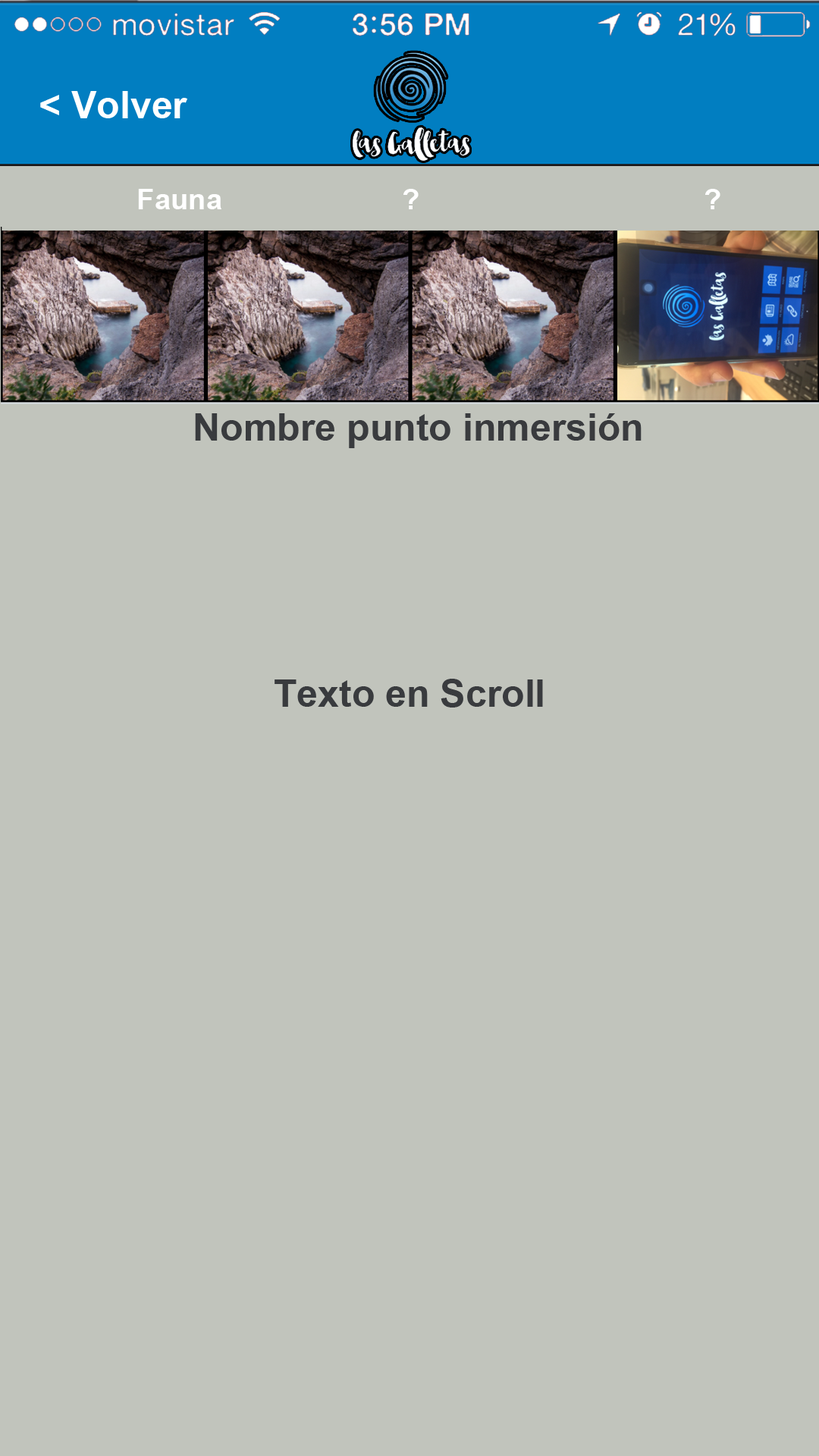
<style>
.page{position:relative;width:819px;height:1456px;background:#c1c4bc}
.page>*{position:absolute;margin:0}
.t1{font:37.9px "Arial-BoldMT";color:#ffffff}
.t2{font:29.1px "Arial-BoldMT";color:#ffffff}
.t3{font:37.9px "Arial-BoldMT";color:#393b3e}
</style>
<div class="page">
<p class="t1" style="left:40px;top:91px;width:147px;height:27px">&lt; Volver</p>
<p class="t2" style="left:138px;top:189px;width:83px;height:20px">Fauna</p>
<p class="t2" style="left:403px;top:189px;width:317px;height:20px">?                                   ?</p>
<p class="t3" style="left:195px;top:413px;width:447px;height:35px">Nombre punto inmersión</p>
<p class="t3" style="left:275px;top:679px;width:268px;height:29px">Texto en Scroll</p>
</div>
